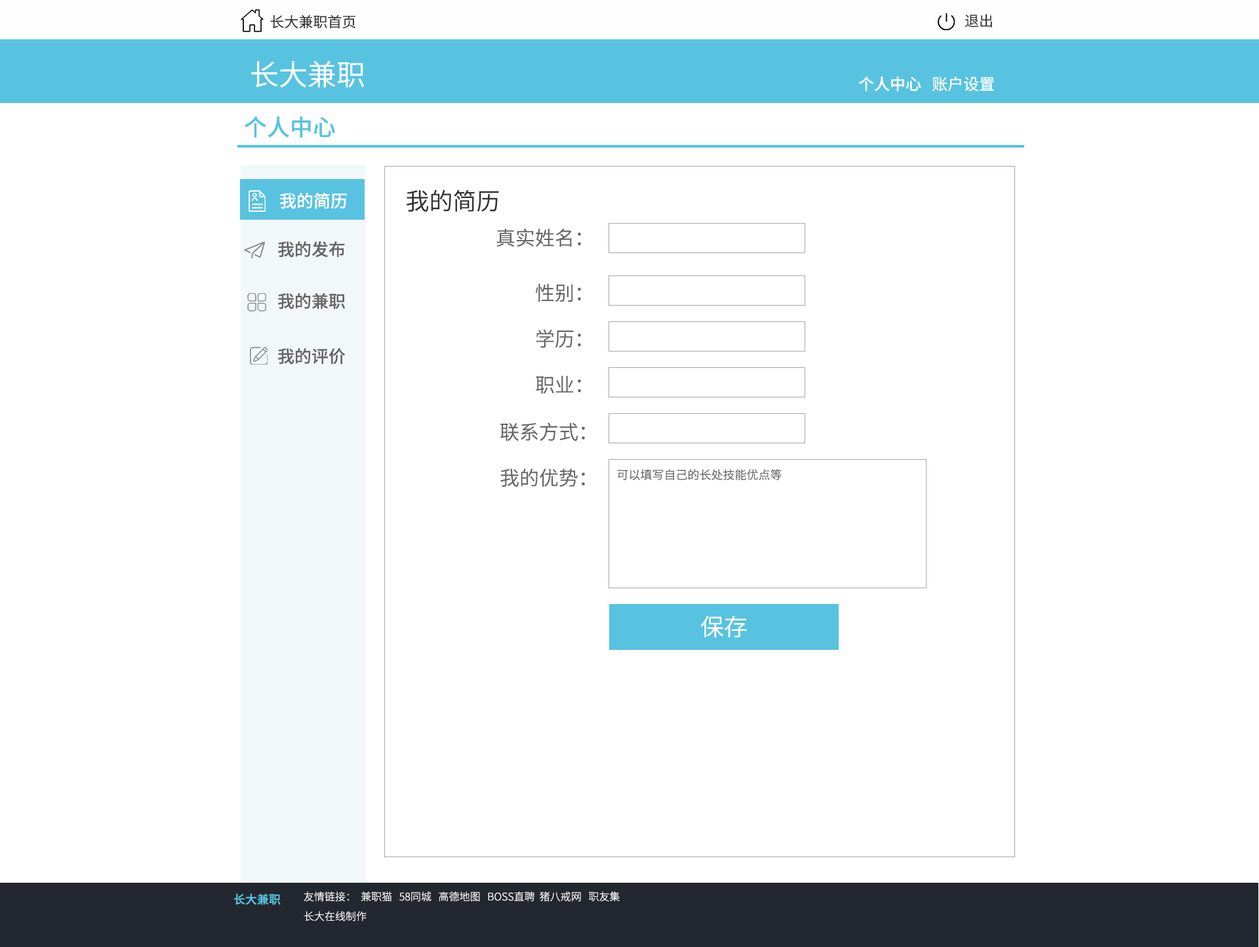
<style>
.page{position:relative;width:1259px;height:947px;background:#ffffff}
.page>*{position:absolute;margin:0}
.t1{font:14.4px "SourceHanSansCN-Normal";color:#333333}
.t2{font:28.9px "SourceHanSansCN-Normal";color:#ffffff}
.t3{font:15.7px "SourceHanSansCN-Medium";color:#ffffff}
.t4{font:15.7px "SourceHanSansCN-Regular";color:#ffffff}
.t5{font:23px "SourceHanSansCN-Medium";color:#57c3e0}
.t6{font:17.1px "SourceHanSansCN-Medium";color:#ffffff}
.t7{font:23.6px "SourceHanSansCN-Normal";color:#333333}
.t8{font:19.7px "SourceHanSansCN-Normal";color:#666666}
.t9{font:17.1px "SourceHanSansCN-Medium";color:#666666}
.t10{font:11.8px "SourceHanSansCN-Normal";color:#666666}
.t11{font:23.6px "SourceHanSansCN-Normal";color:#ffffff}
.t12{font:11.8px "SourceHanSansCN-Medium";color:#57c3e0}
.t13{font:10.5px "SourceHanSansCN-Light";color:#ffffff}
</style>
<div class="page">
<p class="t1" style="left:270px;top:15px;width:85px;height:14px">长大兼职首页</p>
<p class="t1" style="left:965px;top:14px;width:27px;height:14px">退出</p>
<p class="t2" style="left:251px;top:61px;width:113px;height:27px">长大兼职</p>
<p class="t3" style="left:858px;top:76px;width:136px;height:15px">个人中心<span class="t4">   账户设置</span></p>
<p class="t5" style="left:245px;top:116px;width:90px;height:22px">个人中心</p>
<p class="t6" style="left:280px;top:193px;width:67px;height:16px">我的简历</p>
<p class="t7" style="left:407px;top:190px;width:92px;height:22px">我的简历</p>
<p class="t8" style="left:496px;top:228px;width:85px;height:19px">真实姓名：</p>
<p class="t9" style="left:278px;top:241px;width:67px;height:17px">我的发布</p>
<p class="t9" style="left:278px;top:292px;width:67px;height:18px">我的兼职</p>
<p class="t8" style="left:535px;top:283px;width:46px;height:19px">性别：</p>
<p class="t8" style="left:536px;top:329px;width:45px;height:19px">学历：</p>
<p class="t9" style="left:278px;top:348px;width:68px;height:17px">我的评价</p>
<p class="t8" style="left:536px;top:376px;width:45px;height:18px">职业：</p>
<p class="t8" style="left:500px;top:422px;width:85px;height:19px">联系方式：</p>
<p class="t8" style="left:500px;top:468px;width:85px;height:19px">我的优势：</p>
<p class="t10" style="left:617px;top:469px;width:165px;height:12px">可以填写自己的长处技能优点等</p>
<p class="t11" style="left:700px;top:615px;width:47px;height:22px">保存</p>
<p class="t12" style="left:234px;top:893px;width:47px;height:12px">长大兼职</p>
<p class="t13" style="left:304px;top:891px;width:316px;height:11px">友情链接：  兼职猫   58同城   高德地图   BOSS直聘  猪八戒网   职友集</p>
<p class="t13" style="left:304px;top:911px;width:63px;height:10px">长大在线制作</p>
</div>
